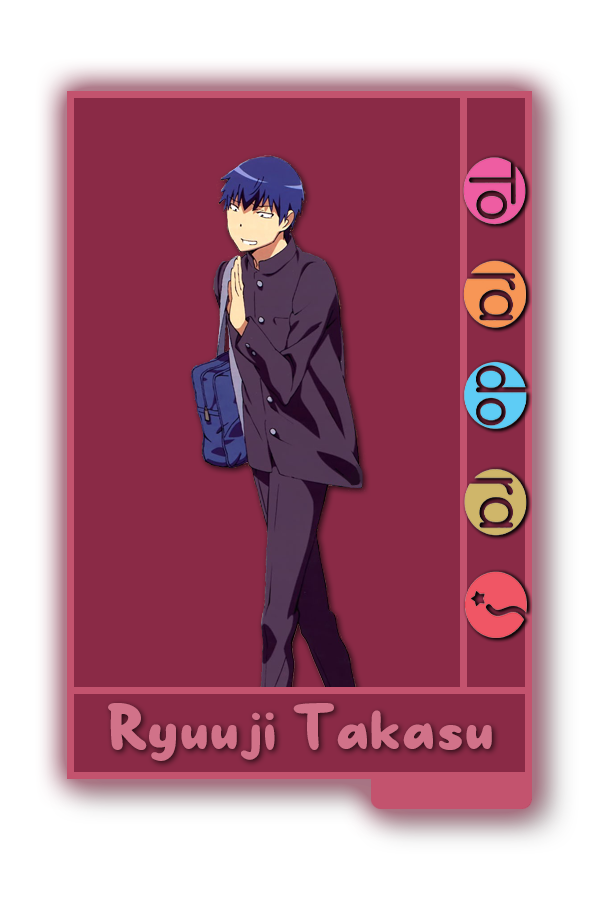
<style>
.page{position:relative;width:600px;height:900px;background:#8a2a46}
.page>*{position:absolute;margin:0}
.t1{font:66.1px "Go-Mocha";color:#d17289;scale:1.08 1}
</style>
<div class="page">
<p class="t1" style="left:108px;top:703px;width:384px;height:58px">Ryuuji Takasu</p>
</div>
